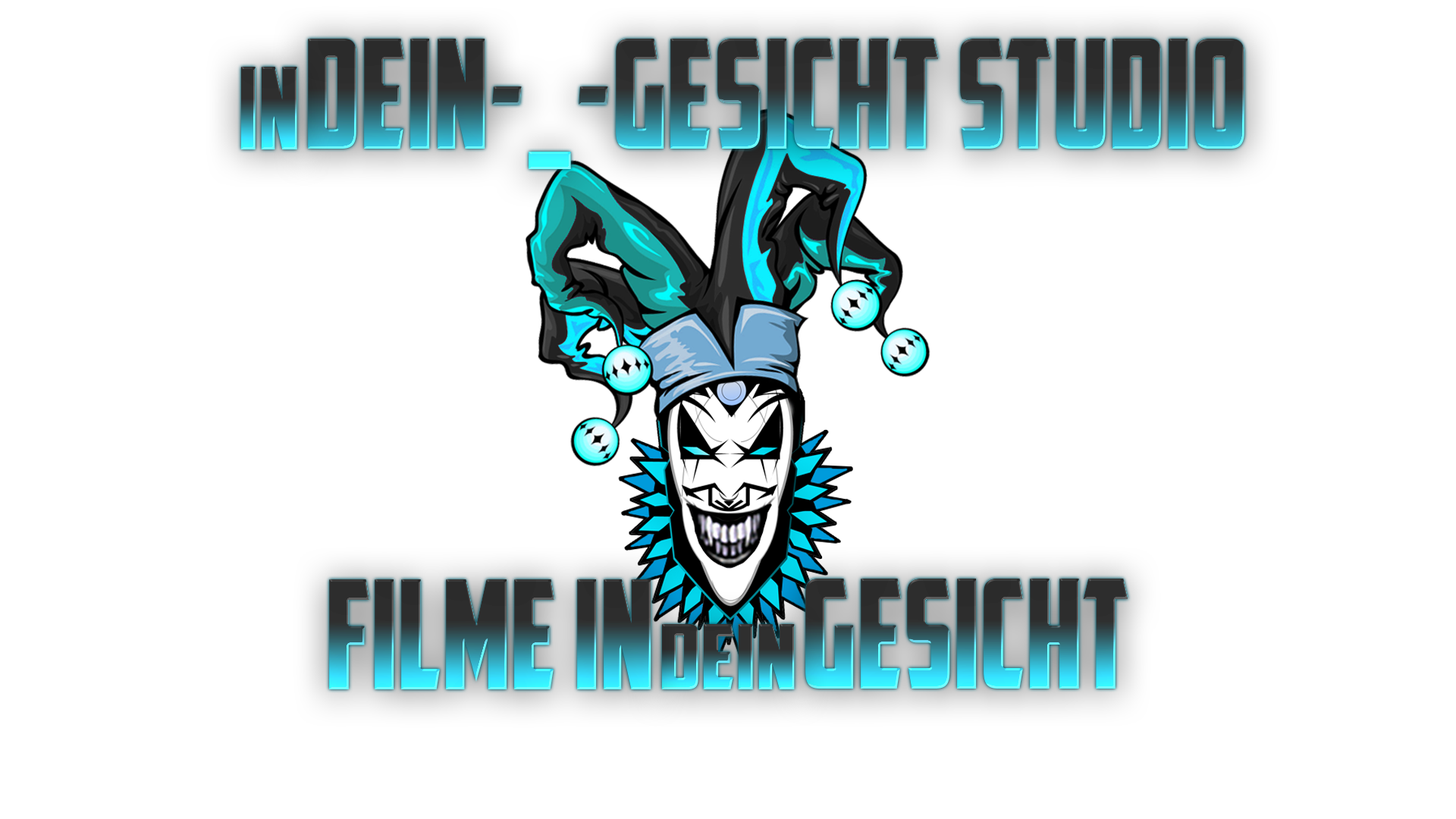
<style>
.page{position:relative;width:1456px;height:819px;background:#ffffff}
.page>*{position:absolute;margin:0}
.t1{font:151.7px "AmericanCaptain";scale:0.86 1}
.t2{font:114.1px "AmericanCaptain";scale:0.86 1}
.t3{font:151.6px "AmericanCaptain";scale:0.86 1}
.t4{font:89.6px "AmericanCaptain";scale:1.09 1}
</style>
<div class="page">
<p class="t1" style="left:308px;top:39px;width:936px;height:130px">dein-_-Gesicht Studio</p>
<p class="t1" style="left:308px;top:39px;width:936px;height:130px">dein-_-Gesicht Studio</p>
<p class="t2" style="left:240px;top:67px;width:57px;height:82px">in</p>
<p class="t2" style="left:240px;top:67px;width:57px;height:82px">in</p>
<p class="t3" style="left:329px;top:579px;width:322px;height:110px">Filme in</p>
<p class="t3" style="left:329px;top:579px;width:322px;height:110px">Filme in</p>
<p class="t3" style="left:805px;top:579px;width:323px;height:110px">Gesicht</p>
<p class="t3" style="left:805px;top:579px;width:323px;height:110px">Gesicht</p>
<p class="t4" style="left:661px;top:624px;width:134px;height:65px">dein</p>
<p class="t4" style="left:661px;top:624px;width:134px;height:65px">dein</p>
</div>
